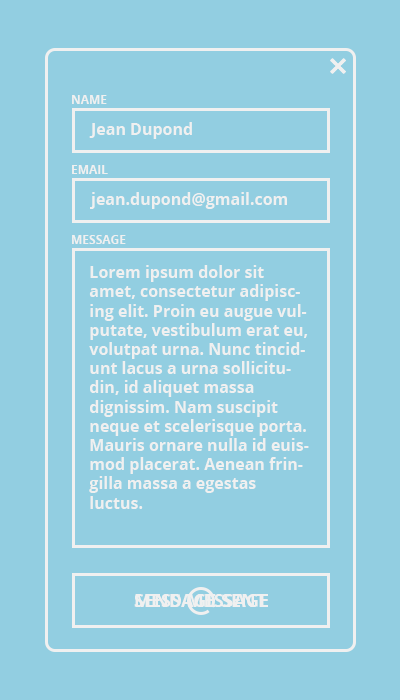
<style>
.page{position:relative;width:400px;height:700px;background:#92cee1}
.page>*{position:absolute;margin:0}
.t1{font:12px "OpenSans-Bold";color:#f0f0f0}
.t2{font:16px "OpenSans-Bold";color:#f0f0f0}
.t3{font:18px "OpenSans-Bold";color:#f0f0f0}
</style>
<div class="page">
<p class="t1" style="left:72px;top:95px;width:35px;height:9px">NAME</p>
<p class="t2" style="left:89px;top:122px;width:103px;height:17px">Jean Dupond</p>
<p class="t1" style="left:72px;top:165px;width:36px;height:9px">EMAIL</p>
<p class="t2" style="left:90px;top:192px;width:197px;height:17px">jean.dupond@gmail.com</p>
<p class="t1" style="left:72px;top:235px;width:54px;height:9px">MESSAGE</p>
<p class="t2" style="left:89px;top:265px;width:220px;height:244px">Lorem ipsum dolor sit amet, consectetur adipiscing elit. Proin eu augue vulputate, vestibulum erat eu, volutpat urna. Nunc tincidunt lacus a urna sollicitudin, id aliquet massa dignissim. Nam suscipit neque et scelerisque porta. Mauris ornare nulla id euismod placerat. Aenean fringilla massa a egestas luctus.</p>
<p class="t3" style="left:134px;top:594px;width:134px;height:13px">SEND MESSAGE</p>
<p class="t3" style="left:135px;top:594px;width:131px;height:13px">MESSAGE SENT</p>
</div>
